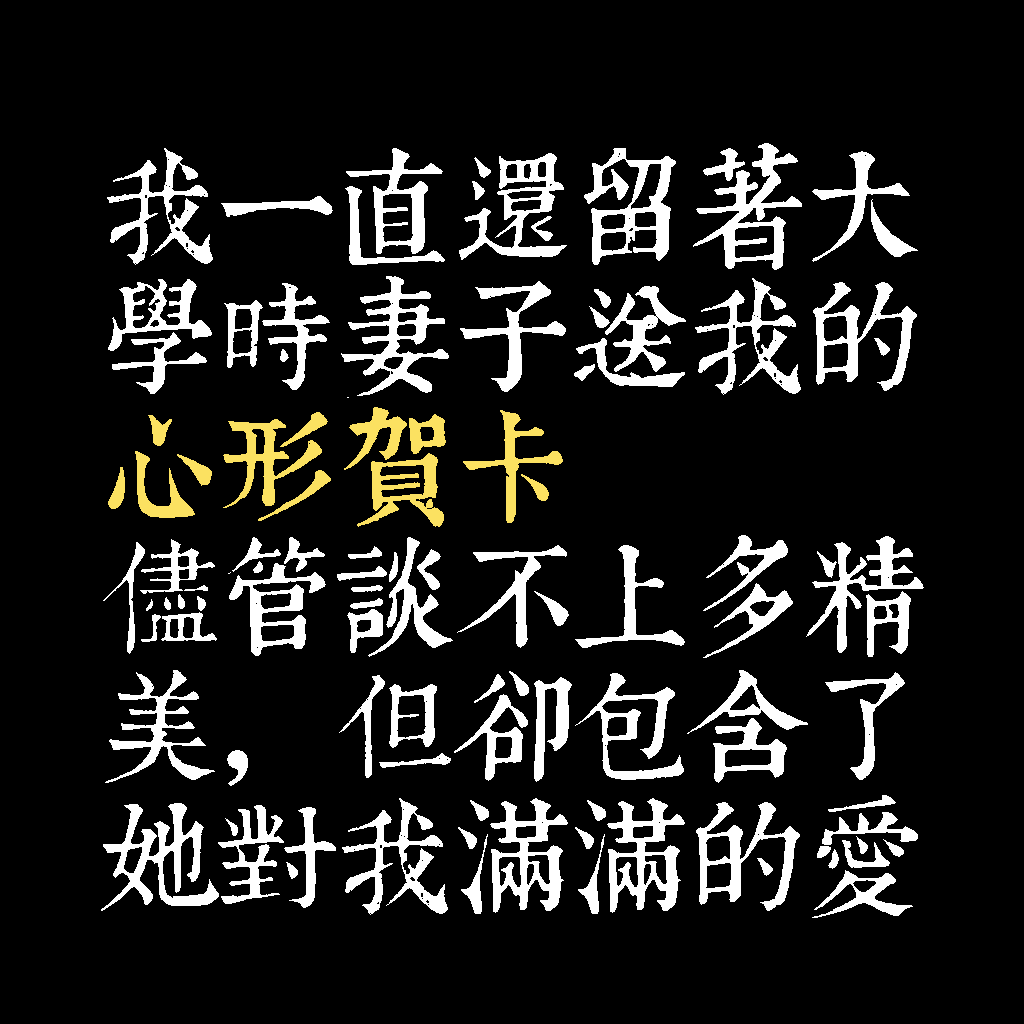
<style>
.page{position:relative;width:1024px;height:1024px;background:#000000}
.page>*{position:absolute;margin:0}
.t1{font:120px/130px "TpldKhangXiDictTrial";letter-spacing:-0.02em;color:#ffffff}
.t2{font:120px/130px "TpldKhangXiDictTrial";letter-spacing:-0.02em;color:#fbe161}
</style>
<div class="page">
<p class="t1" style="left:101px;top:143px;width:823px;height:775px">我一直還留著大<br>學時妻子送我的<br><span class="t2">心形賀卡<br></span>儘管談不上多精<br>美，但卻包含了<br>她對我滿滿的愛</p>
</div>
